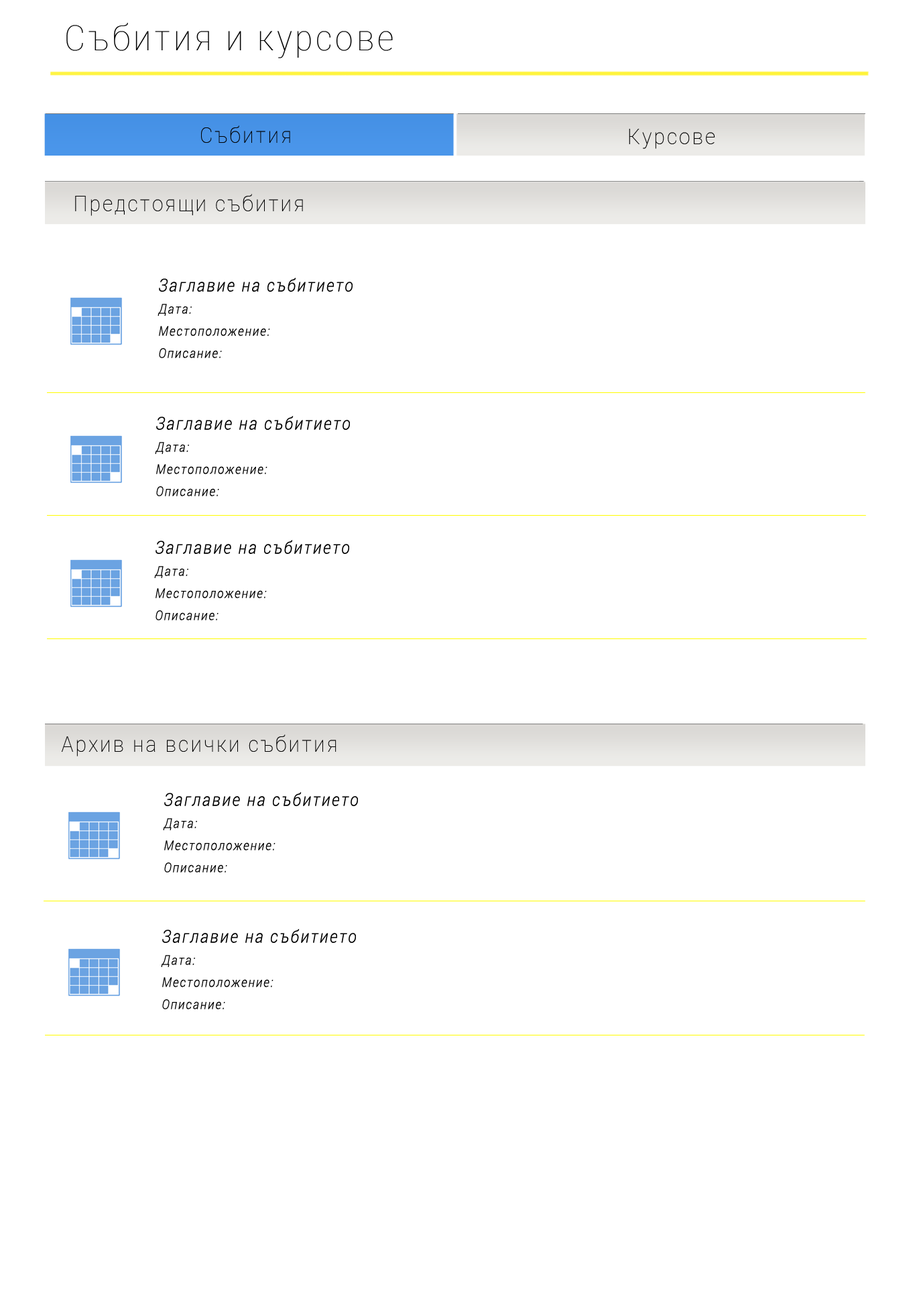
<style>
.page{position:relative;width:921px;height:1295px;background:#ffffff}
.page>*{position:absolute;margin:0}
.t1{font:35.4px "Roboto-Thin";letter-spacing:0.1em;color:#000000;scale:0.91 1}
.t2{font:22.1px "Roboto-Thin";letter-spacing:0.1em;color:#000000;scale:0.91 1}
.t3{font:22.1px "Roboto-Thin";letter-spacing:0.1em;color:#000001;scale:0.91 1}
.t4{font:13.3px/4.4px "Roboto-LightItalic";letter-spacing:0.1em;color:#000000;scale:0.91 1}
.t5{font:17.7px/4.4px "Roboto-LightItalic";letter-spacing:0.1em;color:#000000;scale:0.91 1}
</style>
<div class="page">
<p class="t1" style="left:66px;top:23px;width:327px;height:35px">Събития и курсове</p>
<p class="t2" style="left:201px;top:125px;width:89px;height:18px">Събития</p>
<p class="t2" style="left:629px;top:129px;width:86px;height:20px">Курсове</p>
<p class="t3" style="left:75px;top:194px;width:228px;height:22px">Предстоящи събития</p>
<p class="t4" style="left:158px;top:278px;width:195px;height:80px"><span class="t5">Заглавие на събитието<br><br><br><br><br></span>Дата:<br><br><br><br><br>Местоположение:<br><br><br><br><br>Описание:</p>
<p class="t4" style="left:155px;top:416px;width:195px;height:80px"><span class="t5">Заглавие на събитието<br><br><br><br><br></span>Дата:<br><br><br><br><br>Местоположение:<br><br><br><br><br>Описание:</p>
<p class="t4" style="left:154px;top:540px;width:195px;height:80px"><span class="t5">Заглавие на събитието<br><br><br><br><br></span>Дата:<br><br><br><br><br>Местоположение:<br><br><br><br><br>Описание:</p>
<p class="t2" style="left:61px;top:734px;width:276px;height:22px">Архив на всички събития</p>
<p class="t4" style="left:163px;top:792px;width:195px;height:80px"><span class="t5">Заглавие на събитието<br><br><br><br><br></span>Дата:<br><br><br><br><br>Местоположение:<br><br><br><br><br>Описание:</p>
<p class="t4" style="left:161px;top:929px;width:195px;height:80px"><span class="t5">Заглавие на събитието<br><br><br><br><br></span>Дата:<br><br><br><br><br>Местоположение:<br><br><br><br><br>Описание:</p>
</div>
